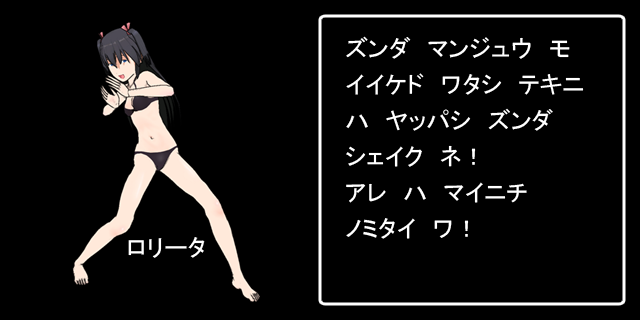
<style>
.page{position:relative;width:640px;height:320px;background:#000000}
.page>*{position:absolute;margin:0}
.t1{font:24px/36px "MS-PGothic";color:#ffffff}
.t2{font:24px "MS-PGothic";color:#ffffff}
</style>
<div class="page">
<p class="t1" style="left:346px;top:36px;width:238px;height:203px">ズンダ　マンジュウ　モ<br>イイケド　ワタシ　テキニ<br>ハ　ヤッパシ　ズンダ<br>シェイク　ネ！<br>アレ　ハ　マイニチ<br>ノミタイ　ワ！</p>
<p class="t2" style="left:128px;top:237px;width:77px;height:21px">ロリータ</p>
</div>
